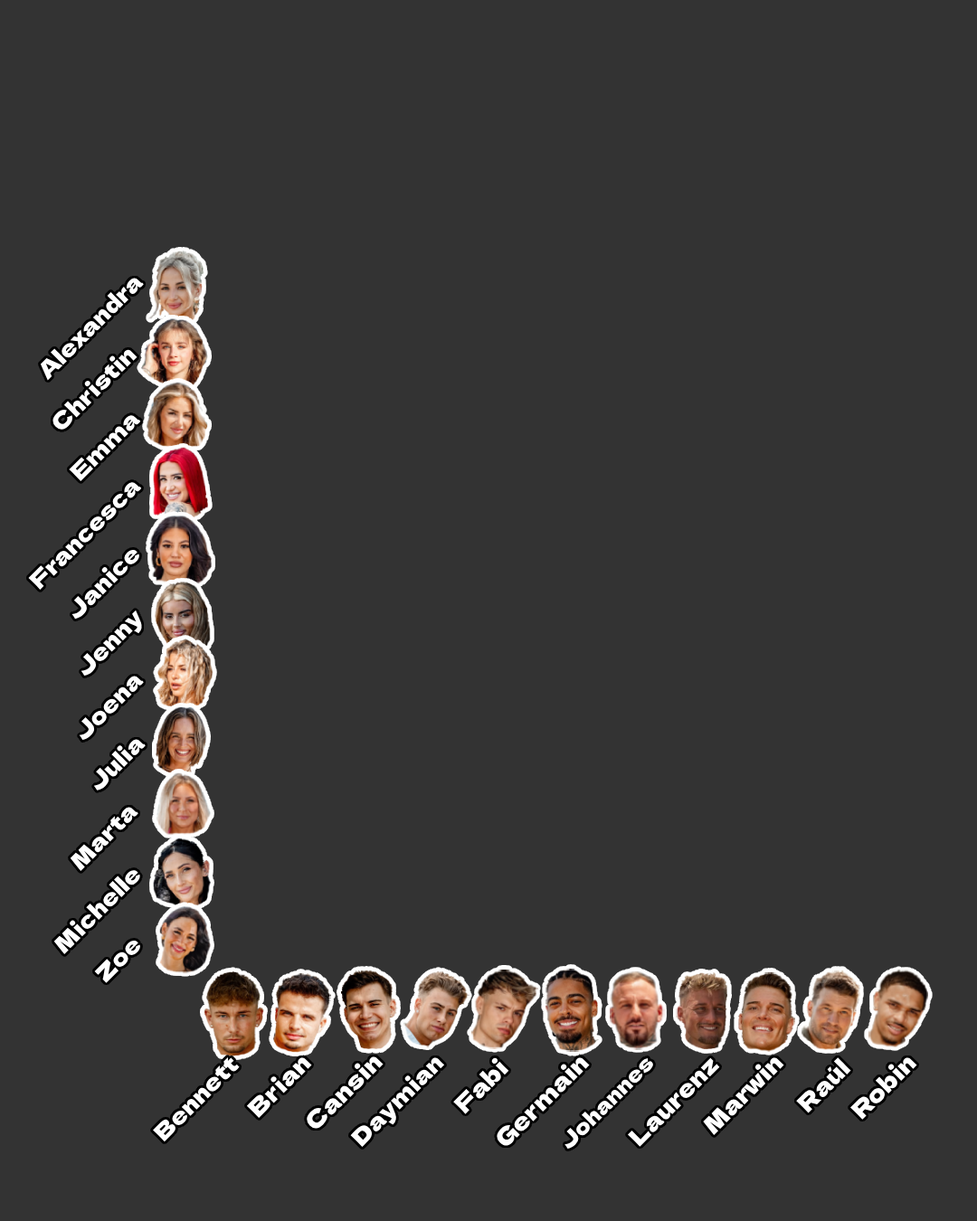
<style>
.page{position:relative;width:977px;height:1221px;background:#333333}
.page>*{position:absolute;margin:0}
.t1{font:22.6px "DelaGothicOne-Regular";color:#ffffff}
.t2{font:23.5px "DelaGothicOne-Regular";color:#ffffff}
.t3{font:20.8px "DelaGothicOne-Regular";color:#ffffff}
</style>
<div class="page">
<p class="t1" style="left:40px;top:278px;width:104px;height:103px;rotate:-45deg">Alexandra</p>
<p class="t1" style="left:52px;top:349px;width:85px;height:81px;rotate:-45deg">Christin</p>
<p class="t1" style="left:69px;top:414px;width:72px;height:67px;rotate:-45deg">Emma</p>
<p class="t1" style="left:28px;top:481px;width:114px;height:109px;rotate:-45deg">Francesca</p>
<p class="t1" style="left:71px;top:549px;width:69px;height:70px;rotate:-45deg">Janice</p>
<p class="t1" style="left:80px;top:610px;width:62px;height:66px;rotate:-45deg">Jenny</p>
<p class="t1" style="left:79px;top:676px;width:65px;height:64px;rotate:-45deg">Joena</p>
<p class="t1" style="left:93px;top:739px;width:53px;height:51px;rotate:-45deg">Julia</p>
<p class="t1" style="left:70px;top:807px;width:68px;height:64px;rotate:-45deg">Marta</p>
<p class="t1" style="left:53px;top:869px;width:88px;height:85px;rotate:-45deg">Michelle</p>
<p class="t1" style="left:94px;top:940px;width:47px;height:43px;rotate:-45deg">Zoe</p>
<p class="t1" style="left:153px;top:1057px;width:87px;height:85px;rotate:-45deg">Bennett</p>
<p class="t2" style="left:246px;top:1057px;width:66px;height:61px;rotate:-45deg">Brian</p>
<p class="t2" style="left:307px;top:1056px;width:76px;height:73px;rotate:-45deg">Cansin</p>
<p class="t1" style="left:350px;top:1057px;width:95px;height:91px;rotate:-45deg">Daymian</p>
<p class="t2" style="left:453px;top:1057px;width:56px;height:57px;rotate:-45deg">Fabi</p>
<p class="t2" style="left:496px;top:1057px;width:94px;height:89px;rotate:-45deg">Germain</p>
<p class="t3" style="left:564px;top:1057px;width:90px;height:92px;rotate:-45deg">Johannes</p>
<p class="t2" style="left:627px;top:1057px;width:93px;height:90px;rotate:-45deg">Laurenz</p>
<p class="t2" style="left:703px;top:1057px;width:81px;height:78px;rotate:-45deg">Marwin</p>
<p class="t2" style="left:796px;top:1057px;width:55px;height:56px;rotate:-45deg">Raúl</p>
<p class="t2" style="left:849px;top:1057px;width:68px;height:63px;rotate:-45deg">Robin</p>
</div>
